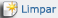
<style>
.page{position:relative;width:58px;height:18px;background:#eff0f1}
.page>*{position:absolute;margin:0}
.t1{font:10px "Verdana";color:#336ca1}
</style>
<div class="page">
<p class="t1" style="left:22px;top:5px;width:35px;height:10px">Limpar</p>
</div>
